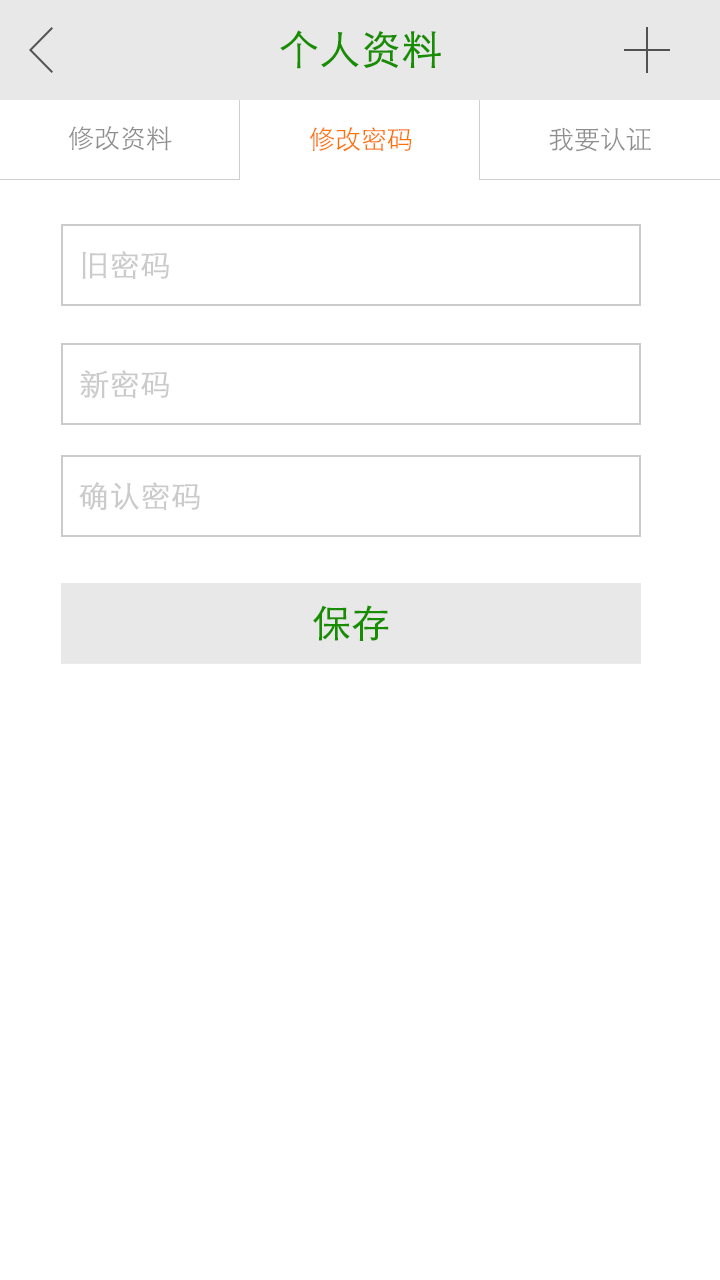
<style>
.page{position:relative;width:720px;height:1280px;background:#ffffff}
.page>*{position:absolute;margin:0}
.t1{font:40px "STXihei";color:#178d00;font-weight:bold}
.t2{font:26px "STXihei";color:#8e8e8e}
.t3{font:26px "STXihei";color:#ff7200}
.t4{font:30px "STXihei";color:#cbcbcb;font-weight:bold}
.t5{font:38px "STXihei";color:#178d00;font-weight:bold}
</style>
<div class="page">
<p class="t1" style="left:280px;top:30px;width:161px;height:39px">个人资料</p>
<p class="t2" style="left:68px;top:126px;width:104px;height:25px">修改资料</p>
<p class="t3" style="left:309px;top:127px;width:103px;height:25px">修改密码</p>
<p class="t2" style="left:549px;top:127px;width:102px;height:25px">我要认证</p>
<p class="t4" style="left:82px;top:251px;width:87px;height:28px">旧密码</p>
<p class="t4" style="left:80px;top:370px;width:89px;height:29px">新密码</p>
<p class="t4" style="left:79px;top:482px;width:121px;height:28px">确认密码</p>
<p class="t5" style="left:313px;top:605px;width:76px;height:36px">保存</p>
</div>
